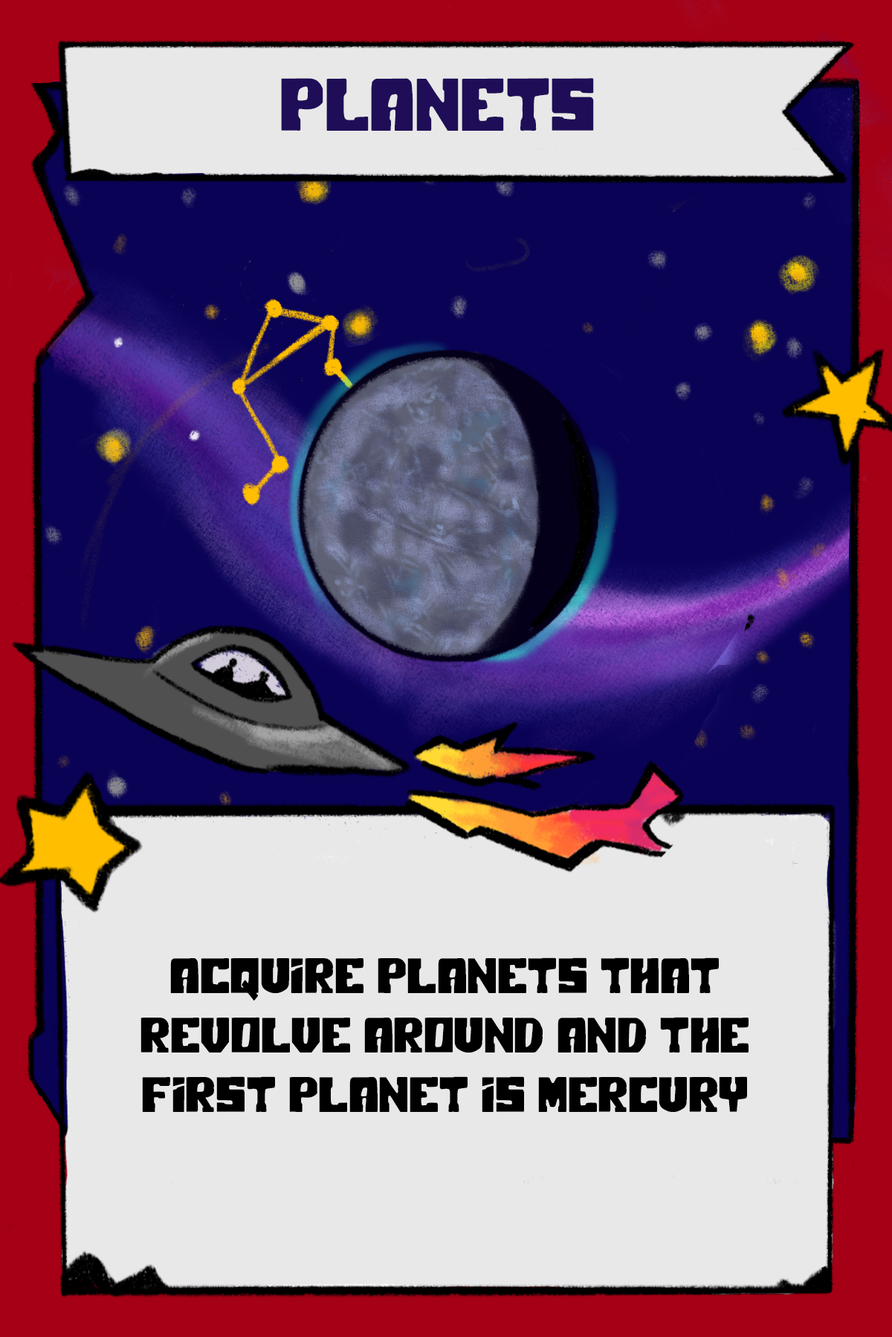
<style>
.page{position:relative;width:892px;height:1337px;background:#e8e8e8}
.page>*{position:absolute;margin:0}
.t1{font:74.3px "PolarPress";color:#1f0e57}
.t2{font:49.5px "PolarPress";color:#000000}
</style>
<div class="page">
<p class="t1" style="left:281px;top:78px;width:313px;height:53px">PLANETS</p>
<p class="t2" style="left:140px;top:958px;width:608px;height:154px;text-align:center">ACquire planets that revolve around and the first planet is mercury</p>
</div>
